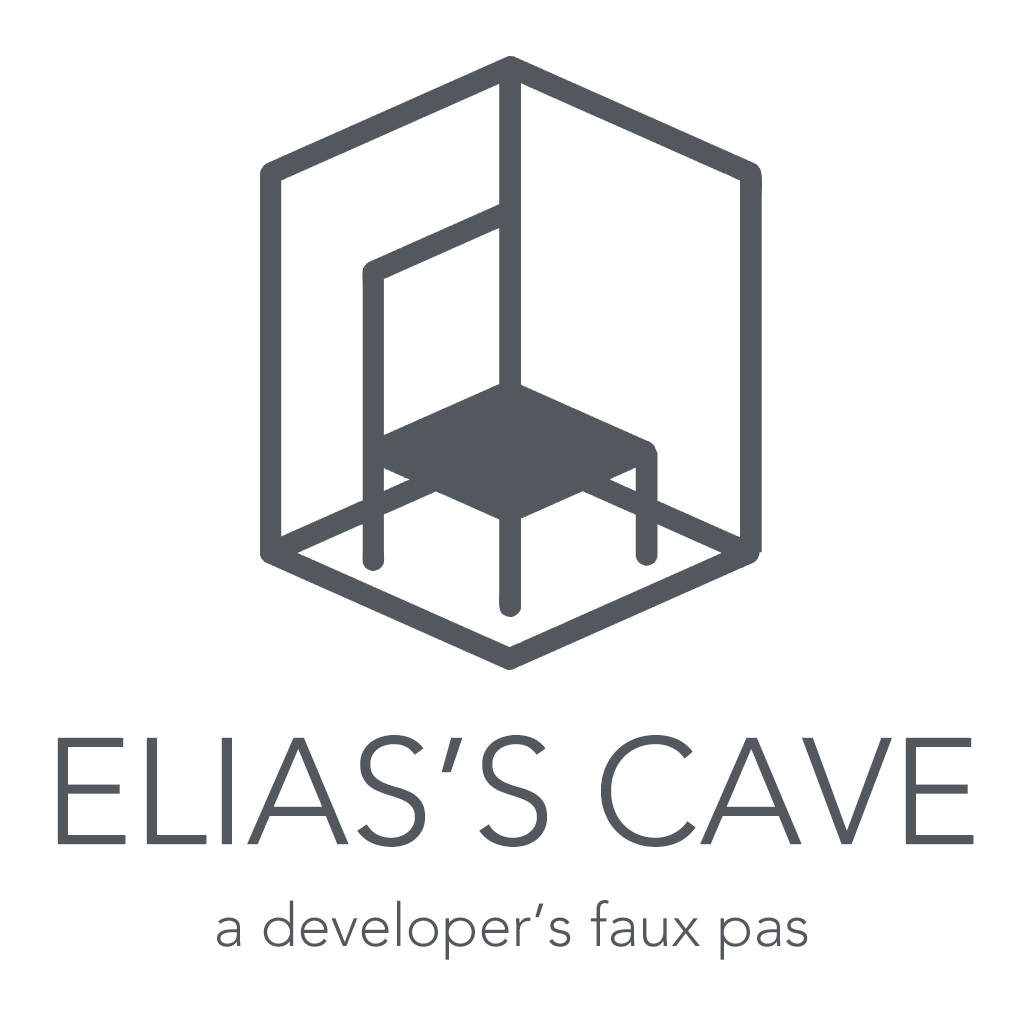
<style>
.page{position:relative;width:1024px;height:1024px;background:#ffffff}
.page>*{position:absolute;margin:0}
.t1{font:150px "Avenir-Light";color:#53585f}
.t2{font:60px "Avenir-Light";color:#53585f}
</style>
<div class="page">
<p class="t1" style="left:57px;top:735px;width:917px;height:112px">ELIAS’S CAVE</p>
<p class="t2" style="left:217px;top:900px;width:591px;height:60px">a developer’s faux pas</p>
</div>
